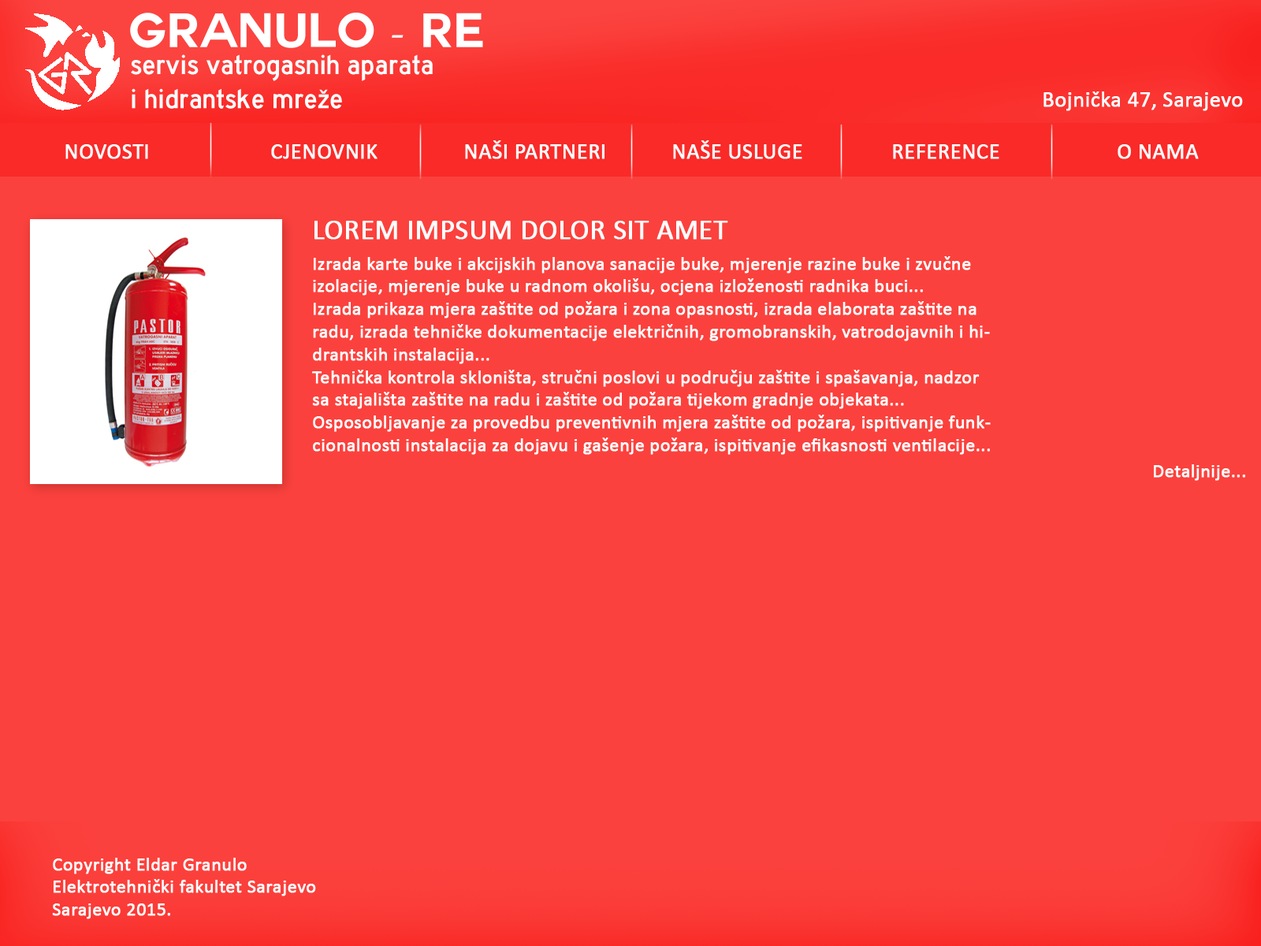
<style>
.page{position:relative;width:1261px;height:946px;background:#fb413d}
.page>*{position:absolute;margin:0}
.t1{font:22.1px "Calibri";color:#ffffff;font-weight:bold}
.t2{font:28.4px "Calibri";color:#ffffff;font-weight:bold}
.t3{font:18.9px "Calibri";color:#ffffff;font-weight:bold}
</style>
<div class="page">
<p class="t1" style="left:1043px;top:91px;width:200px;height:20px">Bojnička 47, Sarajevo</p>
<p class="t1" style="left:65px;top:144px;width:83px;height:15px">NOVOSTI</p>
<p class="t1" style="left:271px;top:144px;width:106px;height:15px">CJENOVNIK</p>
<p class="t1" style="left:465px;top:140px;width:139px;height:19px">NAŠI PARTNERI</p>
<p class="t1" style="left:673px;top:140px;width:129px;height:19px">NAŠE USLUGE</p>
<p class="t1" style="left:893px;top:144px;width:106px;height:15px">REFERENCE</p>
<p class="t1" style="left:1117px;top:144px;width:82px;height:15px">O NAMA</p>
<p class="t2" style="left:314px;top:221px;width:414px;height:19px">LOREM IMPSUM DOLOR SIT AMET</p>
<p class="t3" style="left:312px;top:256px;width:679px;height:199px">Izrada karte buke i akcijskih planova sanacije buke, mjerenje razine buke i zvučne izolacije, mjerenje buke u radnom okolišu, ocjena izloženosti radnika buci...<br>Izrada prikaza mjera zaštite od požara i zona opasnosti, izrada elaborata zaštite na radu, izrada tehničke dokumentacije električnih, gromobranskih, vatrodojavnih i hidrantskih instalacija...<br>Tehnička kontrola skloništa, stručni poslovi u području zaštite i spašavanja, nadzor sa stajališta zaštite na radu i zaštite od požara tijekom gradnje objekata...<br>Osposobljavanje za provedbu preventivnih mjera zaštite od požara, ispitivanje funkcionalnosti instalacija za dojavu i gašenje požara, ispitivanje efikasnosti ventilacije...</p>
<p class="t3" style="left:1154px;top:464px;width:91px;height:17px">Detaljnije...</p>
<p class="t3" style="left:52px;top:857px;width:264px;height:62px">Copyright Eldar Granulo<br>Elektrotehnički fakultet Sarajevo<br>Sarajevo 2015.</p>
</div>
